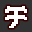
<style>
.page{position:relative;width:32px;height:32px;background:#333333}
.page>*{position:absolute;margin:0}
.t1{font:30px "UnifontMedium";color:#fefefe}
</style>
<div class="page">
<p class="t1" style="left:5px;top:6px;width:22px;height:22px">ቻ</p>
</div>
